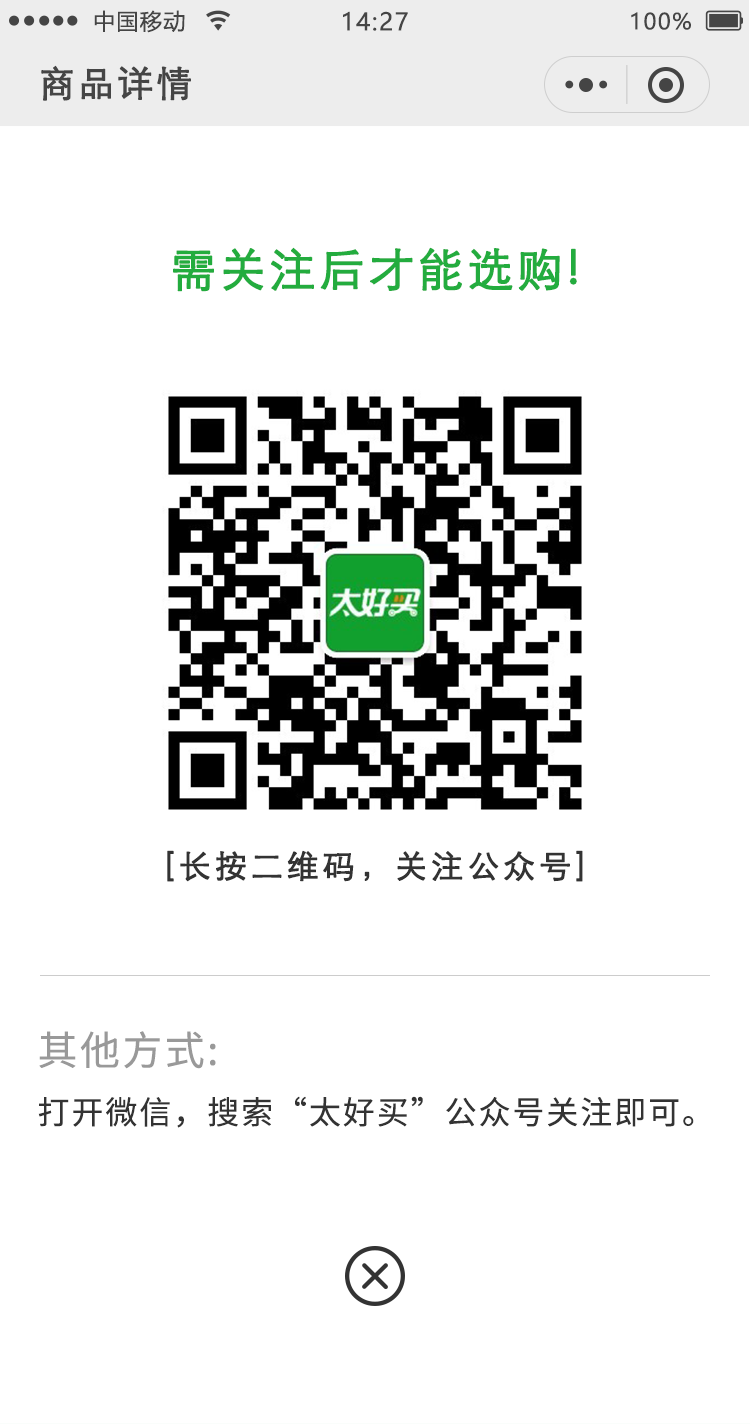
<style>
.page{position:relative;width:750px;height:1424px;background:#ffffff}
.page>*{position:absolute;margin:0}
.t1{font:22px "MicrosoftYaHei";letter-spacing:0.06em;color:#444444}
.t2{font:24px "MicrosoftYaHei";letter-spacing:0.06em;color:#444444}
.t3{font:36px "STXihei";letter-spacing:0.06em;color:#444444;font-weight:bold}
.t4{font:46px "STXihei";letter-spacing:0.05em;color:#23ac3e;font-weight:bold}
.t5{font:32px "STXihei";letter-spacing:0.1em;color:#333333;font-weight:bold}
.t6{font:40px "NotoSansCJKsc-Regular";letter-spacing:0.06em;color:#999999}
.t7{font:32px "NotoSansCJKsc-Regular";letter-spacing:0.06em;color:#333333}
</style>
<div class="page">
<p class="t1" style="left:94px;top:10px;width:91px;height:23px">中国移动</p>
<p class="t2" style="left:343px;top:11px;width:65px;height:20px">14:27</p>
<p class="t1" style="left:631px;top:12px;width:60px;height:18px">100%</p>
<p class="t3" style="left:41px;top:65px;width:150px;height:36px">商品详情</p>
<p class="t4" style="left:173px;top:247px;width:404px;height:45px">需关注后才能选购!</p>
<p class="t5" style="left:167px;top:850px;width:416px;height:32px">[长按二维码，关注公众号]</p>
<p class="t6" style="left:39px;top:1031px;width:177px;height:38px">其他方式:</p>
<p class="t7" style="left:38px;top:1096px;width:656px;height:32px">打开微信，搜索“太好买”公众号关注即可。</p>
</div>
